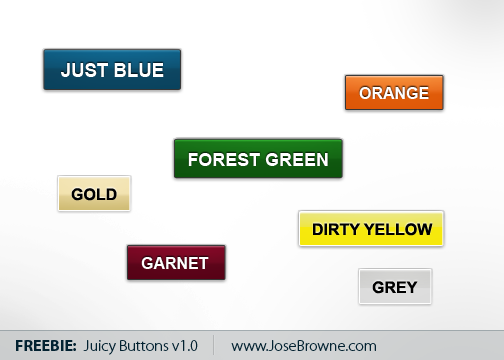
<style>
.page{position:relative;width:504px;height:360px;background:#ffffff}
.page>*{position:absolute;margin:0}
.t1{font:18.6px "Arial-BoldMT";color:#ffffff;text-transform:uppercase}
.t2{font:16px "Arial-BoldMT";color:#ffffff;text-transform:uppercase}
.t3{font:17.9px "Arial-BoldMT";color:#ffffff;text-transform:uppercase}
.t4{font:16px "Arial-BoldMT";color:#000000;text-transform:uppercase}
.t5{font:16px "MyriadPro-Light";color:#032231}
.t6{font:16px "MyriadPro-Bold";color:#032231}
</style>
<div class="page">
<p class="t1" style="left:61px;top:63px;width:103px;height:14px">Just Blue</p>
<p class="t2" style="left:359px;top:87px;width:70px;height:12px">OraNGE</p>
<p class="t3" style="left:188px;top:153px;width:140px;height:13px">Forest Green</p>
<p class="t4" style="left:71px;top:188px;width:46px;height:13px">Gold</p>
<p class="t4" style="left:313px;top:223px;width:120px;height:13px">Dirty Yellow</p>
<p class="t2" style="left:141px;top:257px;width:68px;height:12px">Garnet</p>
<p class="t4" style="left:372px;top:281px;width:46px;height:13px">Grey</p>
<p class="t5" style="left:16px;top:340px;width:182px;height:15px"><span class="t6">FREEBIE:</span>  Juicy Buttons v1.0</p>
<p class="t5" style="left:231px;top:340px;width:145px;height:11px">www.JoseBrowne.com</p>
</div>
